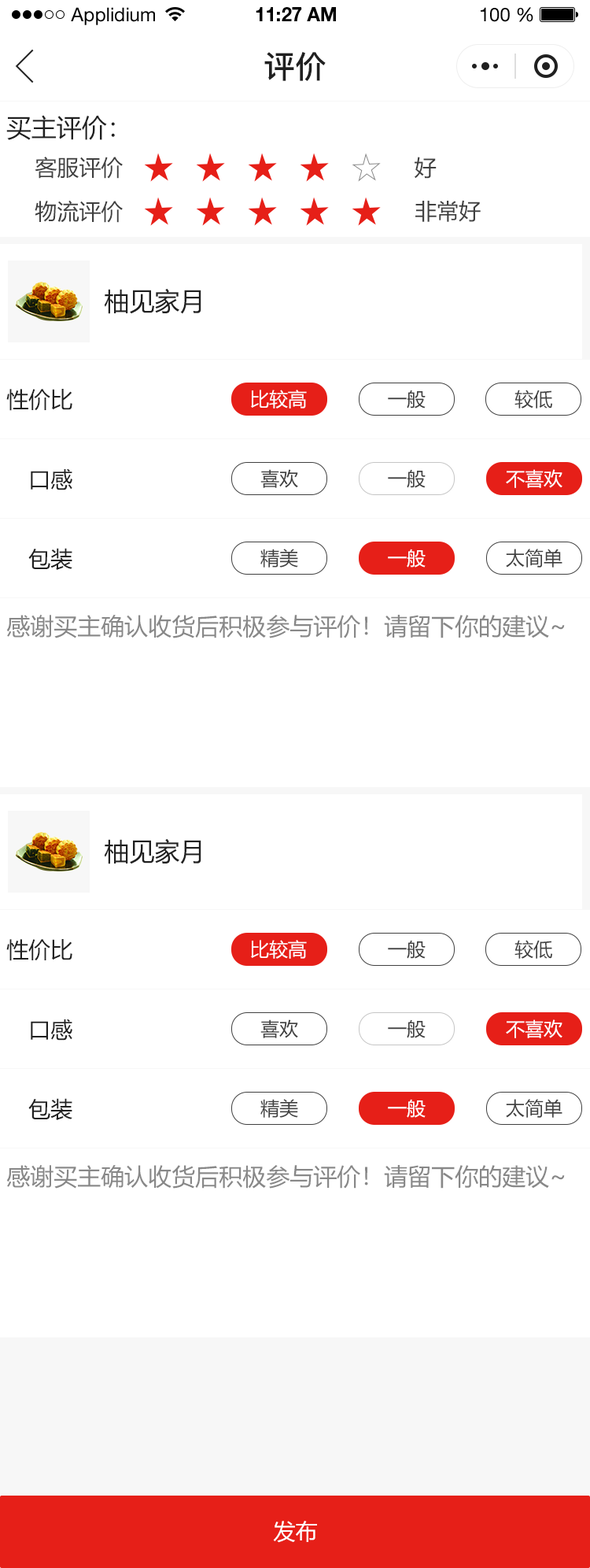
<style>
.page{position:relative;width:590px;height:1568px;background:#ffffff}
.page>*{position:absolute;margin:0}
.t1{font:18.9px "HelveticaNeueLTStd-Roman";color:#000000}
.t2{font:18.9px "HelveticaNeueLTStd-Bd";color:#000000}
.t3{font:31.5px "PingFang-SC-Bold";color:#202020;text-transform:uppercase}
.t4{font:25.2px "MicrosoftYaHei";color:#202020;text-transform:uppercase}
.t5{font:22px "MicrosoftYaHei";color:#404040;text-transform:uppercase}
.t6{font:22px "MicrosoftYaHei";color:#202020;text-transform:uppercase}
.t7{font:18.9px "MicrosoftYaHei";color:#ffffff;text-transform:uppercase}
.t8{font:18.9px "MicrosoftYaHei";color:#404040;text-transform:uppercase}
.t9{font:23.6px "MicrosoftYaHei";color:#888888;text-transform:uppercase}
.t10{font:22px "MicrosoftYaHei";color:#ffffff;text-transform:uppercase}
</style>
<div class="page">
<p class="t1" style="left:71px;top:7px;width:84px;height:18px">Applidium</p>
<p class="t2" style="left:256px;top:7px;width:80px;height:14px">11:27 AM</p>
<p class="t1" style="left:481px;top:7px;width:53px;height:15px">100 %</p>
<p class="t3" style="left:264px;top:51px;width:62px;height:30px">评价</p>
<p class="t4" style="left:6px;top:115px;width:109px;height:25px">买主评价：</p>
<p class="t5" style="left:35px;top:157px;width:88px;height:22px">客服评价</p>
<p class="t5" style="left:415px;top:157px;width:22px;height:22px">好</p>
<p class="t5" style="left:35px;top:200px;width:88px;height:23px">物流评价</p>
<p class="t5" style="left:416px;top:200px;width:65px;height:22px">非常好</p>
<p class="t4" style="left:104px;top:288px;width:98px;height:26px">柚见家月</p>
<p class="t6" style="left:6px;top:389px;width:66px;height:22px">性价比</p>
<p class="t7" style="left:251px;top:390px;width:56px;height:19px">比较高</p>
<p class="t8" style="left:388px;top:390px;width:38px;height:19px">一般</p>
<p class="t8" style="left:515px;top:390px;width:38px;height:19px">较低</p>
<p class="t6" style="left:31px;top:468px;width:41px;height:22px">口感</p>
<p class="t8" style="left:261px;top:469px;width:37px;height:19px">喜欢</p>
<p class="t8" style="left:388px;top:469px;width:38px;height:19px">一般</p>
<p class="t7" style="left:506px;top:469px;width:57px;height:19px">不喜欢</p>
<p class="t6" style="left:28px;top:548px;width:44px;height:22px">包装</p>
<p class="t8" style="left:261px;top:549px;width:37px;height:19px">精美</p>
<p class="t7" style="left:388px;top:549px;width:38px;height:19px">一般</p>
<p class="t8" style="left:506px;top:549px;width:57px;height:19px">太简单</p>
<p class="t9" style="left:6px;top:615px;width:559px;height:23px">感谢买主确认收货后积极参与评价！请留下你的建议~</p>
<p class="t4" style="left:104px;top:838px;width:98px;height:26px">柚见家月</p>
<p class="t6" style="left:6px;top:939px;width:66px;height:22px">性价比</p>
<p class="t7" style="left:251px;top:940px;width:56px;height:19px">比较高</p>
<p class="t8" style="left:388px;top:940px;width:38px;height:19px">一般</p>
<p class="t8" style="left:515px;top:940px;width:38px;height:19px">较低</p>
<p class="t6" style="left:31px;top:1019px;width:41px;height:22px">口感</p>
<p class="t8" style="left:261px;top:1019px;width:37px;height:19px">喜欢</p>
<p class="t8" style="left:388px;top:1019px;width:38px;height:19px">一般</p>
<p class="t7" style="left:506px;top:1019px;width:57px;height:19px">不喜欢</p>
<p class="t6" style="left:28px;top:1098px;width:44px;height:22px">包装</p>
<p class="t8" style="left:261px;top:1099px;width:37px;height:19px">精美</p>
<p class="t7" style="left:388px;top:1099px;width:38px;height:19px">一般</p>
<p class="t8" style="left:506px;top:1099px;width:57px;height:19px">太简单</p>
<p class="t9" style="left:6px;top:1165px;width:559px;height:24px">感谢买主确认收货后积极参与评价！请留下你的建议~</p>
<p class="t10" style="left:273px;top:1521px;width:44px;height:22px">发布</p>
</div>
